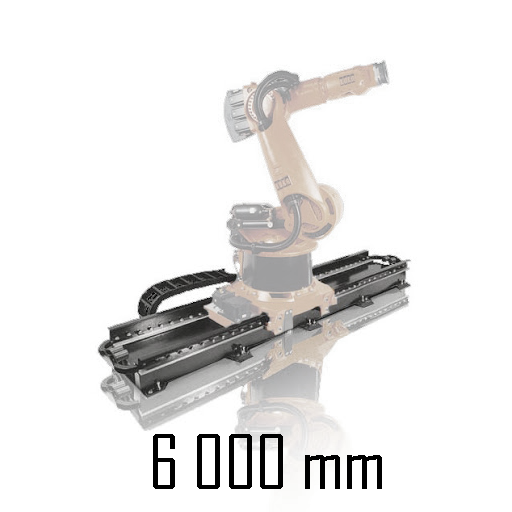
<style>
.page{position:relative;width:512px;height:512px;background:#ffffff}
.page>*{position:absolute;margin:0}
.t1{font:72px "AgencyFB-Reg";color:#000000}
</style>
<div class="page">
<p class="t1" style="left:153px;top:434px;width:229px;height:55px">6 000 mm</p>
</div>
